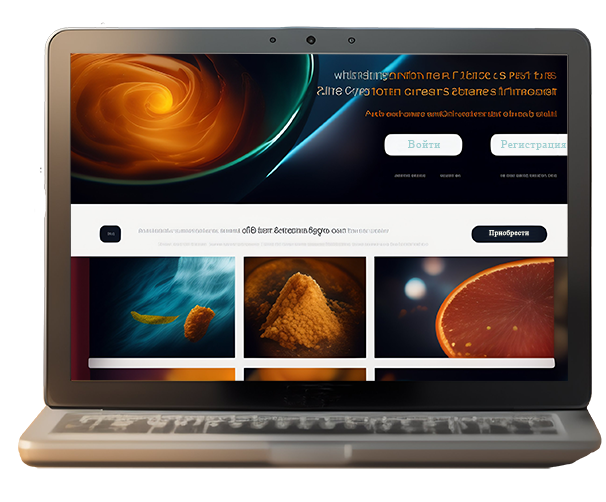
<style>
.page{position:relative;width:606px;height:502px}
.page>*{position:absolute;margin:0}
.t1{font:11.2px "TimesNewRomanPSMT";letter-spacing:0.05em;color:#9fcfd1}
.t2{font:7px "TimesNewRomanPSMT";letter-spacing:0.05em;color:#f7f9f1}
</style>
<div class="page">
<p class="t1" style="left:408px;top:140px;width:32px;height:8px">Войти</p>
<p class="t1" style="left:501px;top:140px;width:65px;height:10px">Регистрация</p>
<p class="t2" style="left:489px;top:230px;width:40px;height:7px">Приобрести</p>
</div>
